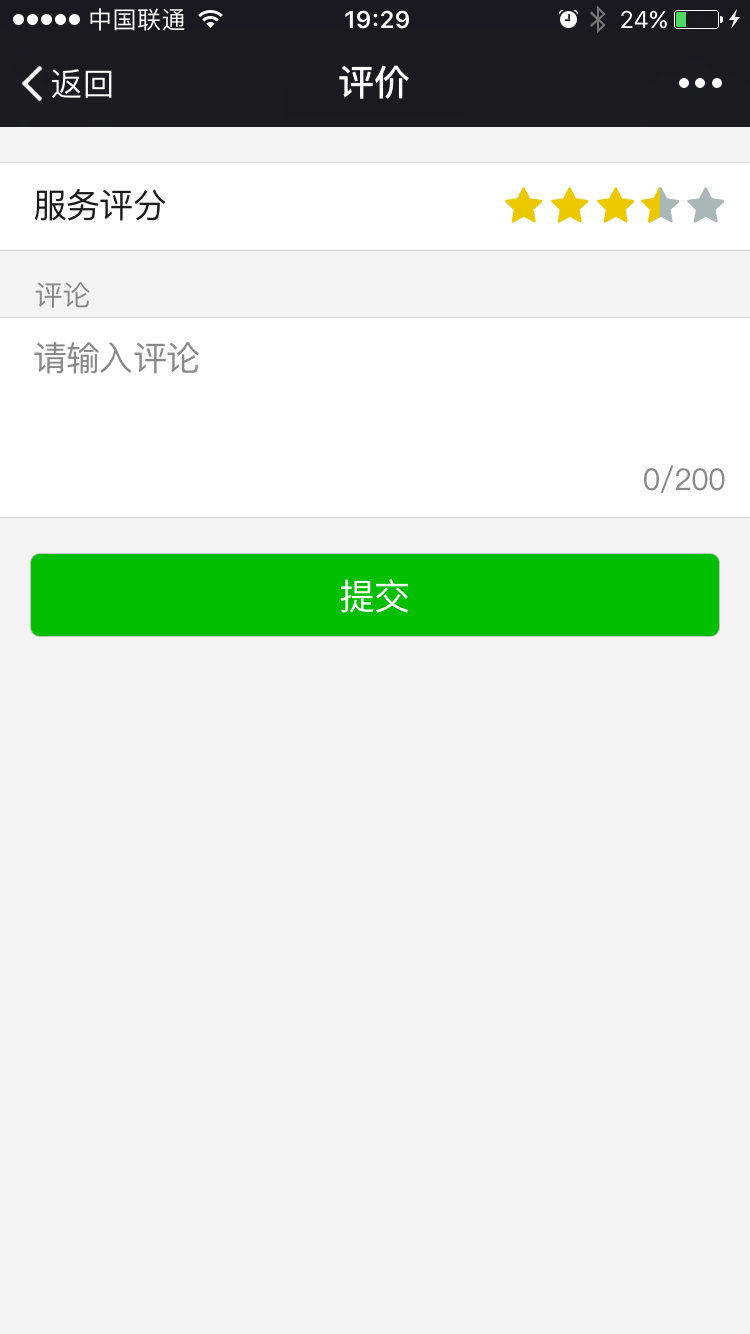
<style>
.page{position:relative;width:750px;height:1334px;background:#f3f3f3}
.page>*{position:absolute;margin:0}
.t1{font:36px "PingFangSC-Medium";color:#ffffff}
.t2{font:34px "PingFangSC-Regular";letter-spacing:-0.026em;color:#1a1a1a}
.t3{font:28px "PingFangSC-Regular";color:#888888}
.t4{font:34px "PingFangSC-Regular";letter-spacing:-0.026em;color:#888888}
.t5{font:30px "PingFangSC-Regular";letter-spacing:-0.026em;color:#888888}
.t6{font:36px "PingFangSC-Regular";letter-spacing:-0.026em;color:#ffffff}
</style>
<div class="page">
<p class="t1" style="left:339px;top:65px;width:70px;height:34px">评价</p>
<p class="t2" style="left:35px;top:189px;width:131px;height:32px">服务评分</p>
<p class="t3" style="left:35px;top:282px;width:55px;height:26px">评论</p>
<p class="t4" style="left:34px;top:342px;width:165px;height:32px">请输入评论</p>
<p class="t5" style="left:644px;top:465px;width:81px;height:28px">0/200</p>
<p class="t6" style="left:340px;top:579px;width:69px;height:34px">提交</p>
</div>
